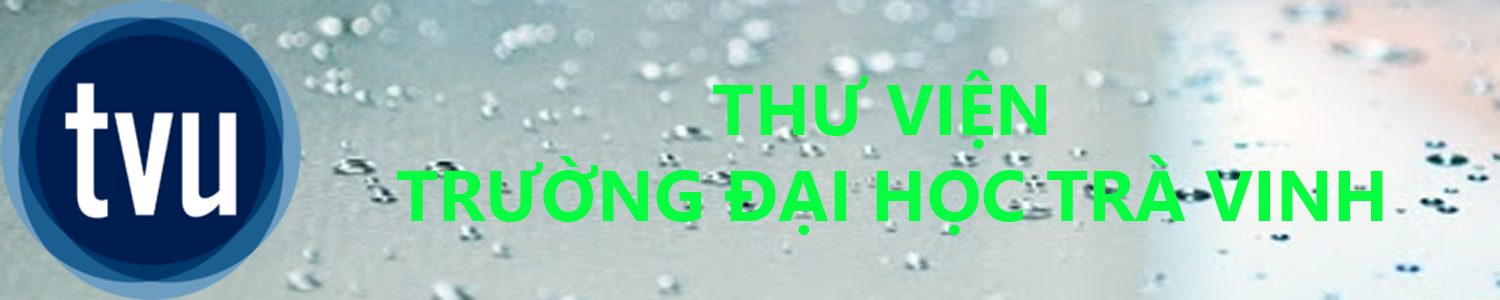
<style>
.page{position:relative;width:1500px;height:300px}
.page>*{position:absolute;margin:0}
.t1{font:72px "LeelawadeeUI-Bold";color:#06fd40}
</style>
<div class="page">
<p class="t1" style="left:397px;top:70px;width:986px;height:165px;text-align:center">THƯ VIỆN <br>TRƯỜNG ĐẠI HỌC TRÀ VINH</p>
</div>
